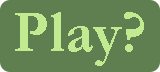
<style>
.page{position:relative;width:160px;height:72px;background:#607f51}
.page>*{position:absolute;margin:0}
.t1{font:60px "Garamond-Bold";color:#c1ea91}
</style>
<div class="page">
<p class="t1" style="left:15px;top:12px;width:129px;height:54px">Play?</p>
</div>
